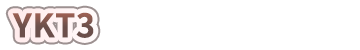
<style>
.page{position:relative;width:360px;height:50px;background:#ffffff}
.page>*{position:absolute;margin:0}
.t1{font:32px "SourceHanSansSC-Bold";color:#73534d;font-weight:bold}
</style>
<div class="page">
<p class="t1" style="left:12px;top:12px;width:82px;height:26px">YKT3</p>
</div>
